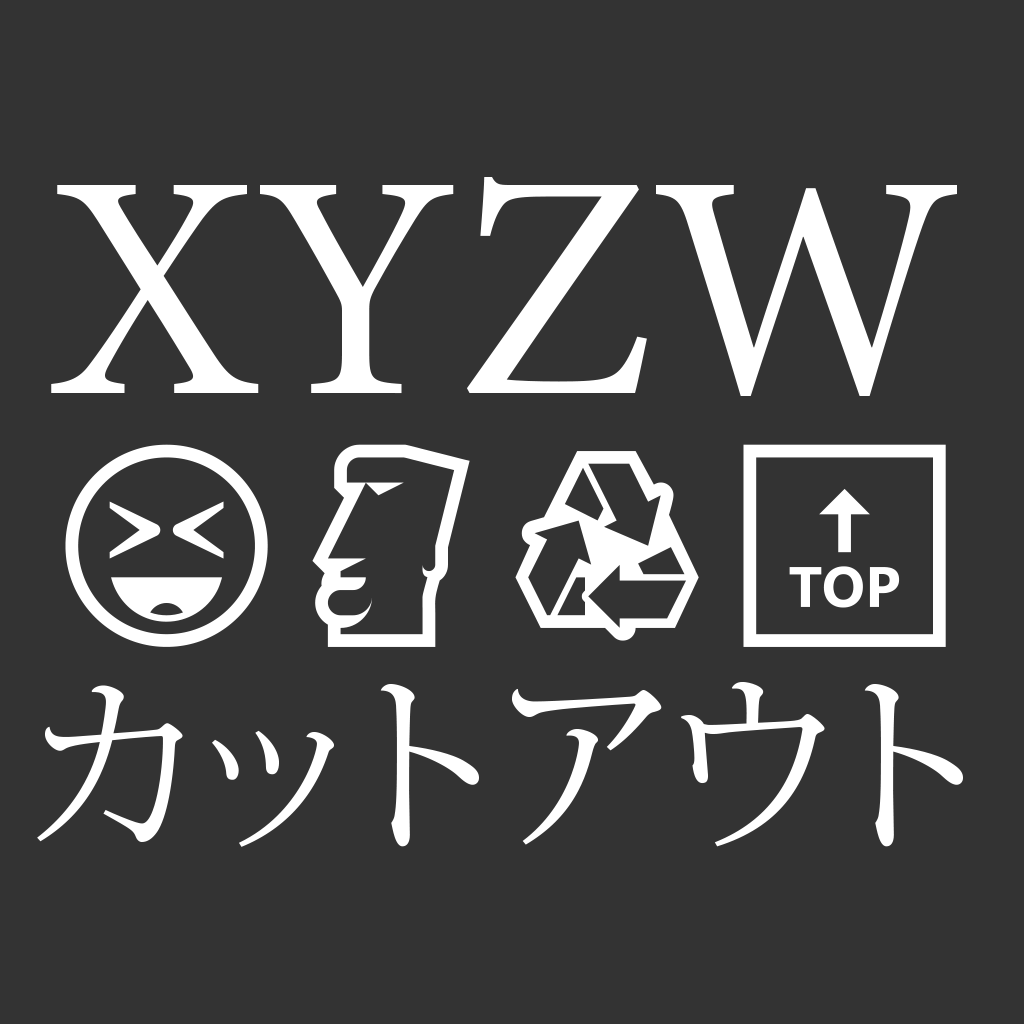
<style>
.page{position:relative;width:1024px;height:1024px;background:#333333}
.page>*{position:absolute;margin:0}
.t1{font:190px "KozMinPro-Regular";color:#ffffff}
.t2{font:320px "MinionPro-Regular";color:#ffffff}
.t3{font:180px "SegoeUIEmoji";color:#ffffff}
</style>
<div class="page">
<p class="t1" style="left:37px;top:177px;width:926px;height:670px;text-align:center"><span class="t2">XYZW<br></span><span class="t3">😆🗿♻🔝<br></span>カットアウト</p>
</div>
